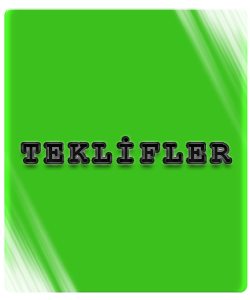
<style>
.page{position:relative;width:250px;height:300px;background:#3cc01d}
.page>*{position:absolute;margin:0}
.t1{font:31.1px "CourierNewPS-BoldMT";letter-spacing:0.16em;color:#0d0d0d}
.t2{font:29.6px "CourierNewPS-BoldMT";letter-spacing:0.2em;color:#0c0c0c}
</style>
<div class="page">
<p class="t1" style="left:22px;top:138px;width:209px;height:24px">TEKLİFLER</p>
<p class="t2" style="left:23px;top:138px;width:208px;height:24px">TEKLİFLER</p>
</div>
